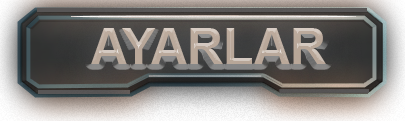
<style>
.page{position:relative;width:405px;height:121px}
.page>*{position:absolute;margin:0}
.t1{font:50px "Arial-BoldMT";color:#bbaa9c}
</style>
<div class="page">
<p class="t1" style="left:91px;top:28px;width:235px;height:36px">AYARLAR</p>
</div>
